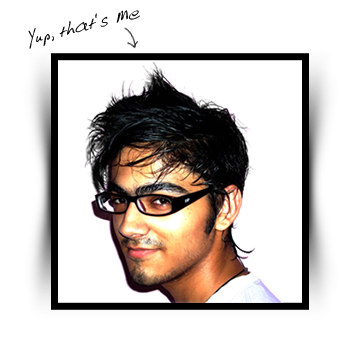
<style>
.page{position:relative;width:360px;height:363px;background:#ffffff}
.page>*{position:absolute;margin:0}
.t1{font:19px "AlvinsHand-Plain";color:#000000}
</style>
<div class="page">
<p class="t1" style="left:28px;top:10px;width:112px;height:39px;rotate:-14deg">Yup, that’s Me</p>
</div>
